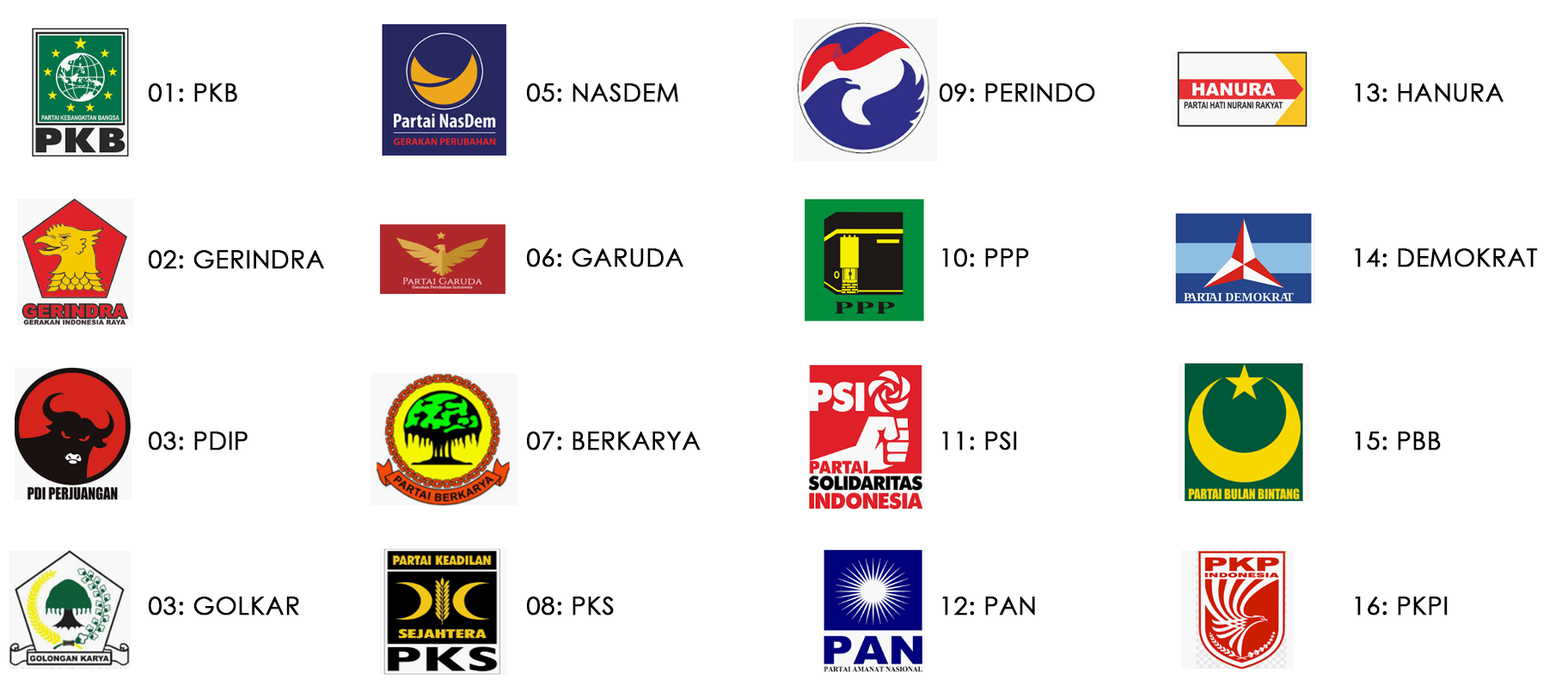
<style>
.page{position:relative;width:1568px;height:698px;background:#ffffff}
.page>*{position:absolute;margin:0}
.t1{font:25.1px "CenturyGothic";color:#000000;font-weight:bold}
</style>
<div class="page">
<p class="t1" style="left:148px;top:83px;width:89px;height:19px">01: PKB</p>
<p class="t1" style="left:526px;top:83px;width:152px;height:19px">05: NASDEM</p>
<p class="t1" style="left:939px;top:83px;width:156px;height:19px">09: PERINDO</p>
<p class="t1" style="left:1355px;top:83px;width:149px;height:19px">13: HANURA</p>
<p class="t1" style="left:148px;top:250px;width:176px;height:19px">02: GERINDRA</p>
<p class="t1" style="left:526px;top:248px;width:157px;height:19px">06: GARUDA</p>
<p class="t1" style="left:942px;top:248px;width:87px;height:19px">10: PPP</p>
<p class="t1" style="left:1355px;top:248px;width:183px;height:19px">14: DEMOKRAT</p>
<p class="t1" style="left:148px;top:432px;width:100px;height:18px">03: PDIP</p>
<p class="t1" style="left:526px;top:432px;width:175px;height:18px">07: BERKARYA</p>
<p class="t1" style="left:942px;top:432px;width:75px;height:18px">11: PSI</p>
<p class="t1" style="left:1355px;top:432px;width:86px;height:18px">15: PBB</p>
<p class="t1" style="left:148px;top:597px;width:151px;height:19px">03: GOLKAR</p>
<p class="t1" style="left:526px;top:597px;width:88px;height:19px">08: PKS</p>
<p class="t1" style="left:942px;top:597px;width:93px;height:19px">12: PAN</p>
<p class="t1" style="left:1355px;top:597px;width:93px;height:19px">16: PKPI</p>
</div>
